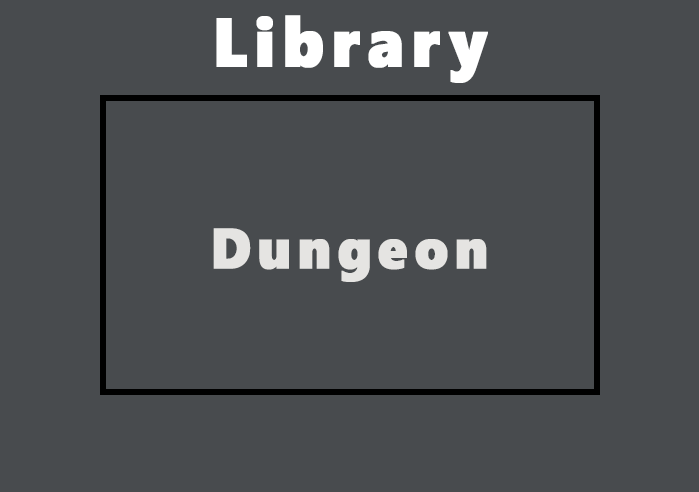
<style>
.page{position:relative;width:699px;height:492px;background:#484b4e}
.page>*{position:absolute;margin:0}
.t1{font:68.5px "SegoeWP-Black";letter-spacing:0.1em;color:#ffffff;font-weight:bold;scale:0.93 1}
.t2{font:56.7px "SegoeWP-Black";letter-spacing:0.1em;color:#e5e4e2;font-weight:bold;scale:0.93 1}
</style>
<div class="page">
<p class="t1" style="left:216px;top:15px;width:272px;height:68px">Library</p>
<p class="t2" style="left:213px;top:228px;width:274px;height:54px">Dungeon</p>
</div>
